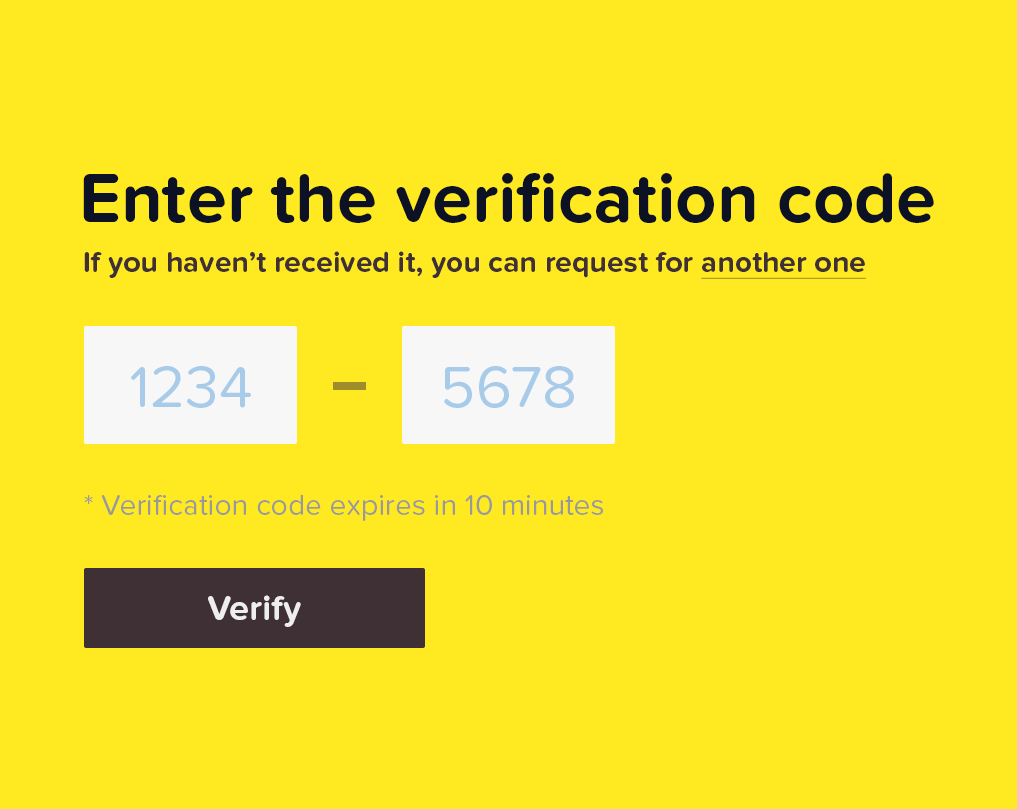
<style>
.page{position:relative;width:1017px;height:809px;background:#ffea22}
.page>*{position:absolute;margin:0}
.t1{font:72px "ProximaNovaSoft-Bold";color:#0c1124}
.t2{font:30px "ProximaNovaSoft-Bold";color:#3f3035}
.t3{font:30px "ProximaNovaSoft-Bold";color:#3f3035;text-decoration:underline}
.t4{font:60px "ProximaNovaSoft-Regular";color:#a8cbe9}
.t5{font:30px "ProximaNovaSoft-Regular";color:#999999}
.t6{font:36px "ProximaNovaSoft-Bold";color:#eeeeee}
</style>
<div class="page">
<p class="t1" style="left:83px;top:173px;width:851px;height:50px">Enter the verification code</p>
<p class="t2" style="left:84px;top:251px;width:782px;height:28px">If you haven’t received it, you can request for <span class="t3">another one</span></p>
<p class="t4" style="left:131px;top:366px;width:120px;height:42px">1234</p>
<p class="t4" style="left:444px;top:366px;width:130px;height:42px">5678</p>
<p class="t5" style="left:84px;top:494px;width:519px;height:27px">* Verification code expires in 10 minutes</p>
<p class="t6" style="left:208px;top:595px;width:93px;height:32px">Verify</p>
</div>
